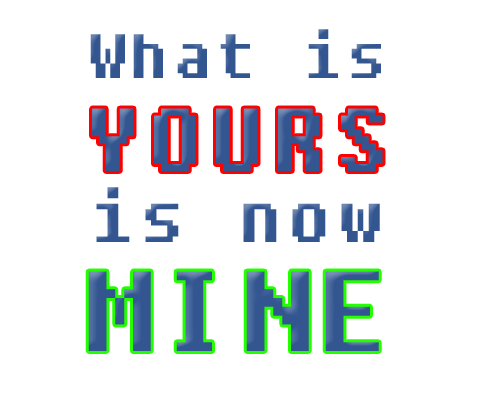
<style>
.page{position:relative;width:500px;height:400px;background:#ffffff}
.page>*{position:absolute;margin:0}
.t1{font:62.2px "Fixedsys";letter-spacing:0.075em;color:#335691}
.t2{font:88.9px "Fixedsys";letter-spacing:0.075em;color:#335691}
.t3{font:70px "Fixedsys";letter-spacing:0.075em;color:#335691}
.t4{font:113px "Fixedsys";letter-spacing:0.075em;color:#335691}
</style>
<div class="page">
<p class="t1" style="left:90px;top:29px;width:291px;height:49px">What is</p>
<p class="t2" style="left:92px;top:108px;width:291px;height:63px">YOURS</p>
<p class="t3" style="left:96px;top:187px;width:284px;height:55px">is now</p>
<p class="t4" style="left:88px;top:271px;width:291px;height:80px">MINE</p>
</div>
